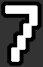
<style>
.page{position:relative;width:43px;height:67px;background:#333333}
.page>*{position:absolute;margin:0}
.t1{font:72px "Cubic_11";letter-spacing:0.1em;color:#ffffff;font-weight:bold}
</style>
<div class="page">
<p class="t1" style="left:5px;top:5px;width:33px;height:57px">7</p>
</div>
